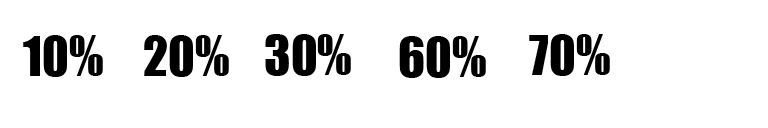
<style>
.page{position:relative;width:768px;height:128px;background:#ffffff}
.page>*{position:absolute;margin:0}
.t1{font:50px "Impact";color:#000000}
</style>
<div class="page">
<p class="t1" style="left:23px;top:35px;width:80px;height:42px">10%</p>
<p class="t1" style="left:144px;top:35px;width:85px;height:42px">20%</p>
<p class="t1" style="left:265px;top:34px;width:86px;height:42px">30%</p>
<p class="t1" style="left:399px;top:36px;width:87px;height:42px">60%</p>
<p class="t1" style="left:529px;top:34px;width:81px;height:42px">70%</p>
</div>
